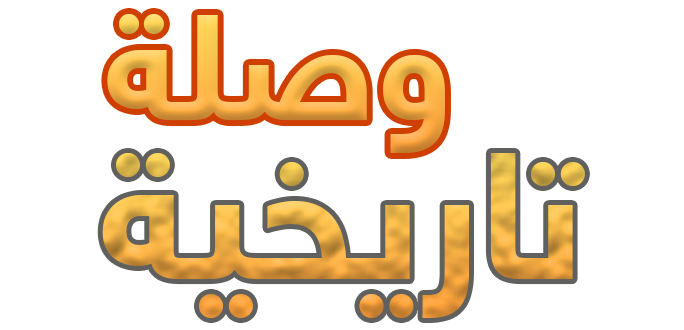
<style>
.page{position:relative;width:684px;height:330px;background:#ffffff}
.page>*{position:absolute;margin:0}
.t1{font:150px "HelveticaNeueW23foSKY-Bd"}
.t2{font:180px "HelveticaNeueW23foSKY-Bd"}
</style>
<div class="page">
<p class="t1" style="left:107px;top:14px;width:338px;height:139px">وصلة</p>
<p class="t2" style="left:102px;top:153px;width:483px;height:165px">تاريخية</p>
</div>
